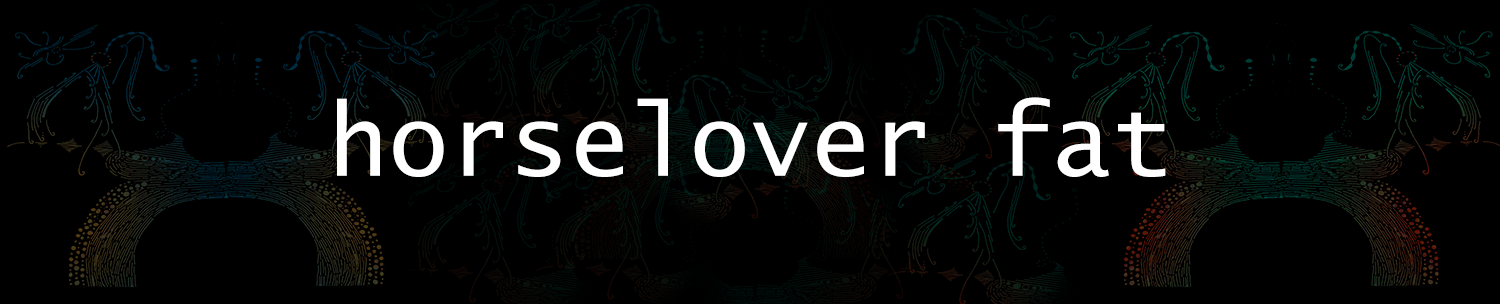
<style>
.page{position:relative;width:1500px;height:304px;background:#000000}
.page>*{position:absolute;margin:0}
.t1{font:100px "LucidaSans-Typewriter";color:#ffffff}
</style>
<div class="page">
<p class="t1" style="left:337px;top:97px;width:829px;height:80px">horselover fat</p>
</div>
